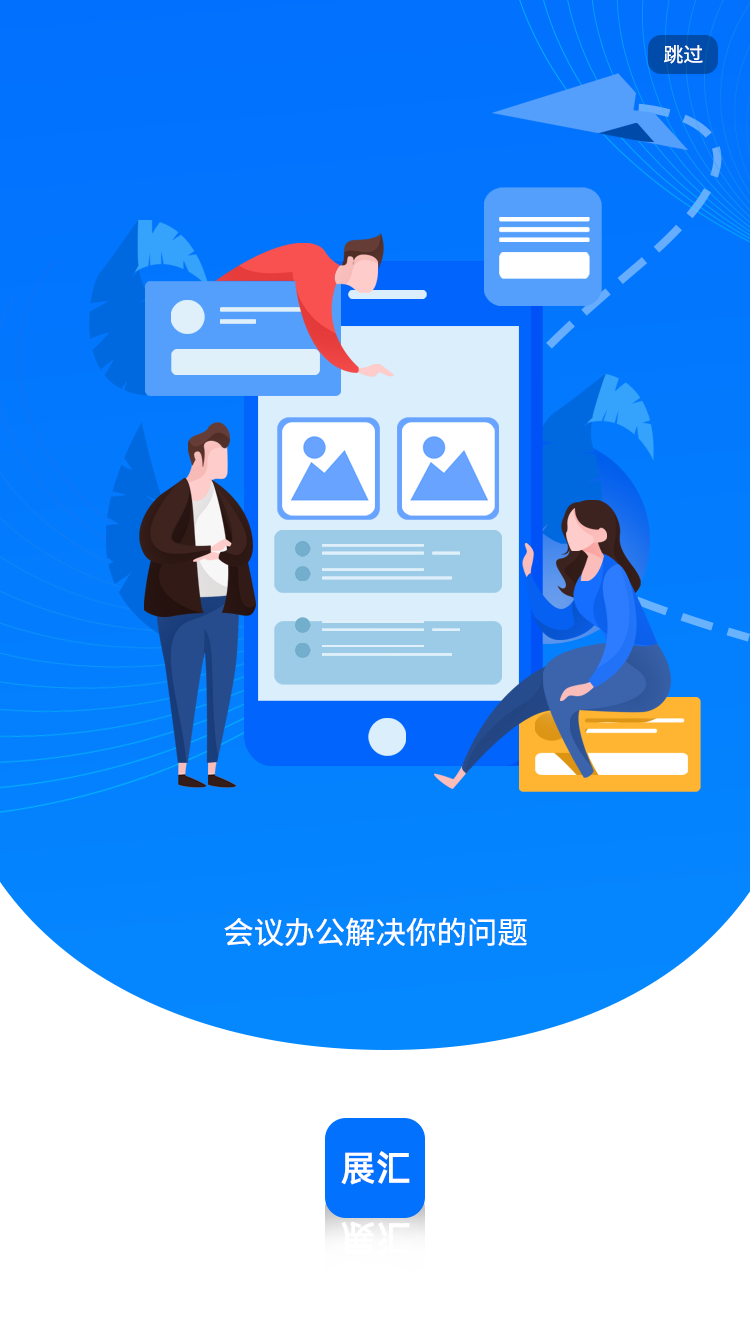
<style>
.page{position:relative;width:750px;height:1334px;background:#ffffff}
.page>*{position:absolute;margin:0}
.t1{font:20px "SourceHanSansCN-Regular";color:#ffffff}
.t2{font:30.5px "SourceHanSansCN-Regular";color:#ffffff}
</style>
<div class="page">
<p class="t1" style="left:664px;top:45px;width:39px;height:19px">跳过</p>
<p class="t2" style="left:224px;top:917px;width:303px;height:30px">会议办公解决你的问题</p>
</div>
